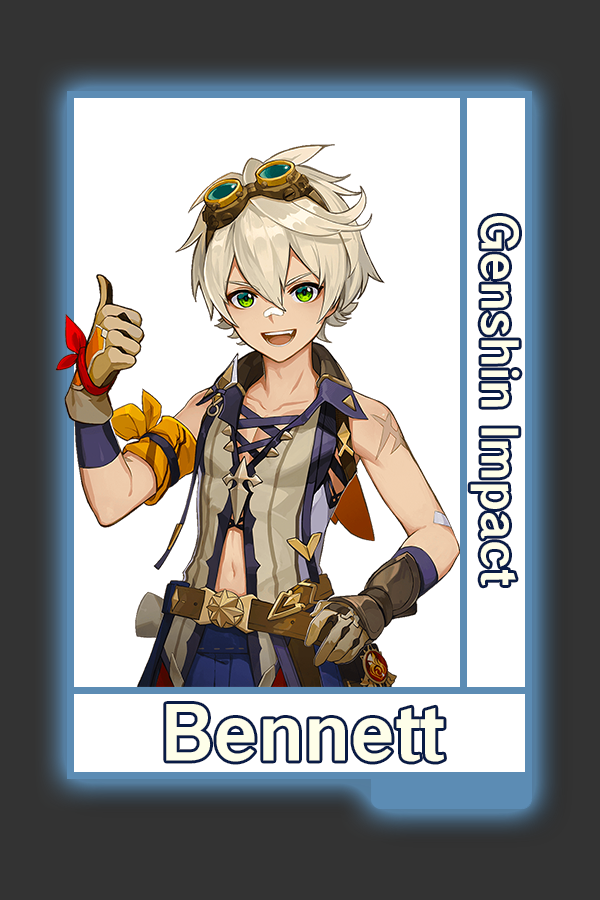
<style>
.page{position:relative;width:600px;height:900px;background:#ffffff}
.page>*{position:absolute;margin:0}
.t1{font:48.8px "HYWenHei-HEW";color:#fefef4}
.t2{font:75px "HYWenHei-HEW";color:#fefef4}
</style>
<div class="page">
<p class="t1" style="left:470px;top:216px;width:50px;height:370px;rotate:90deg">Genshin Impact</p>
<p class="t2" style="left:166px;top:704px;width:278px;height:58px">Bennett</p>
</div>
